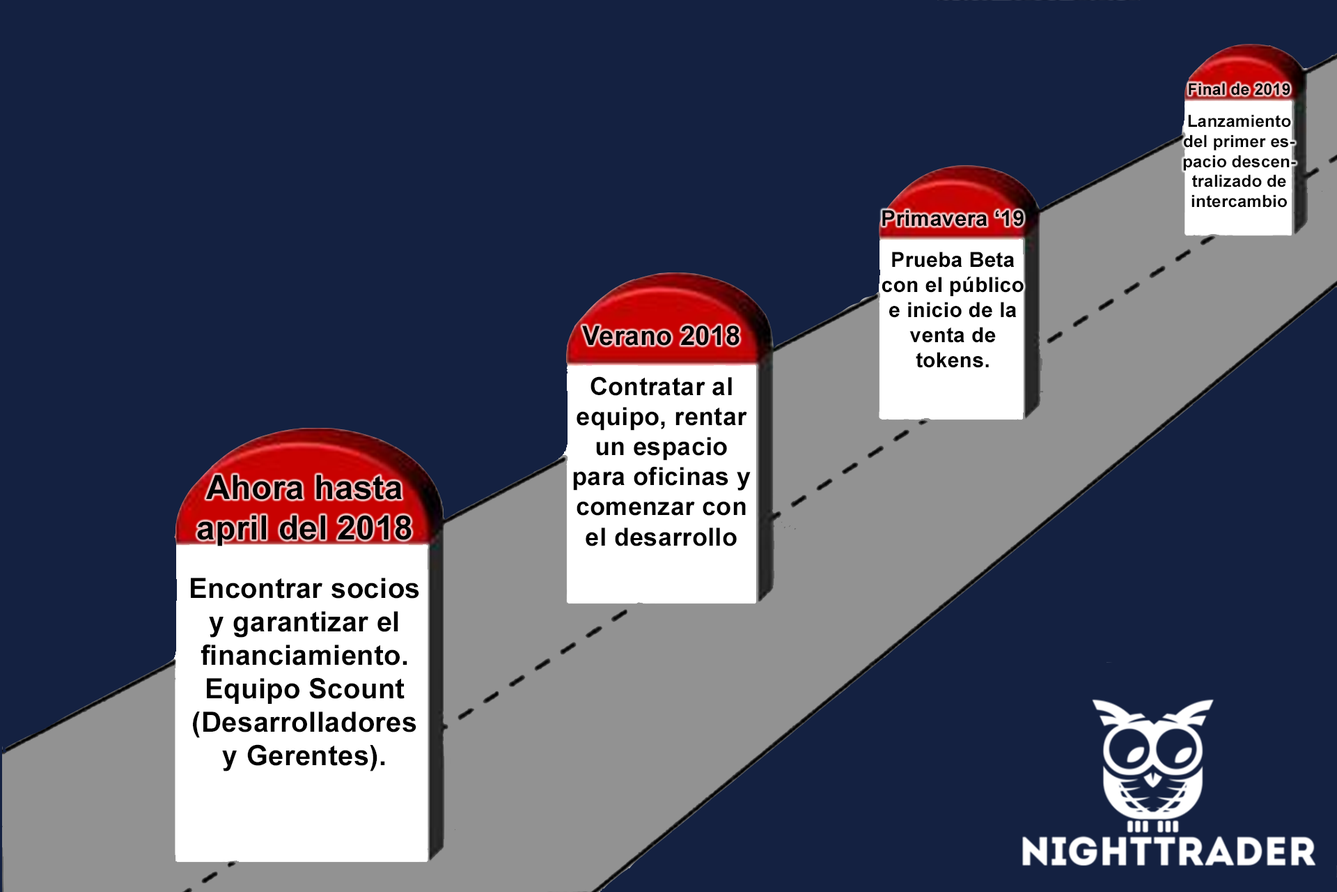
<style>
.page{position:relative;width:1337px;height:892px;background:#142141}
.page>*{position:absolute;margin:0}
.t1{font:16.7px "Arial-BoldMT";letter-spacing:0.01em;color:#000000}
.t2{font:16.1px "Arial-BoldMT";letter-spacing:0.01em;color:#000000}
.t3{font:20.9px "Arial-BoldMT";letter-spacing:0.01em;color:#000000}
.t4{font:21.7px "Arial-BoldMT";letter-spacing:0.01em;color:#000000}
.t5{font:25.1px "Arial-BoldMT";letter-spacing:0.01em;color:#000000}
.t6{font:26.6px "Arial-BoldMT";letter-spacing:0.01em;color:#000000}
.t7{font:27.9px "Arial-BoldMT";letter-spacing:0.01em;color:#000000}
.t8{font:33.4px "Arial-BoldMT";letter-spacing:0.01em;color:#000000}
</style>
<div class="page">
<p class="t1" style="left:1183px;top:83px;width:113px;height:125px;text-align:center"><span class="t2">Final de 2019<br> <br></span>Lanzamiento del primer espacio descentralizado de intercambio del mundo</p>
<p class="t3" style="left:882px;top:210px;width:142px;height:158px;text-align:center"><span class="t4">Primavera ‘19<br> <br></span>Prueba Beta con el público e inicio de la venta de tokens.</p>
<p class="t5" style="left:573px;top:325px;width:178px;height:221px;text-align:center"><span class="t6">Verano 2018<br> <br></span>Contratar al equipo, rentar un espacio para oficinas y comenzar con el desarrollo</p>
<p class="t7" style="left:191px;top:474px;width:228px;height:297px;text-align:center"><span class="t8">Ahora hasta april del 2018<br> <br></span>Encontrar socios y garantizar el <br>financiamiento. Equipo Scount (Desarrolladores y Gerentes).</p>
</div>
